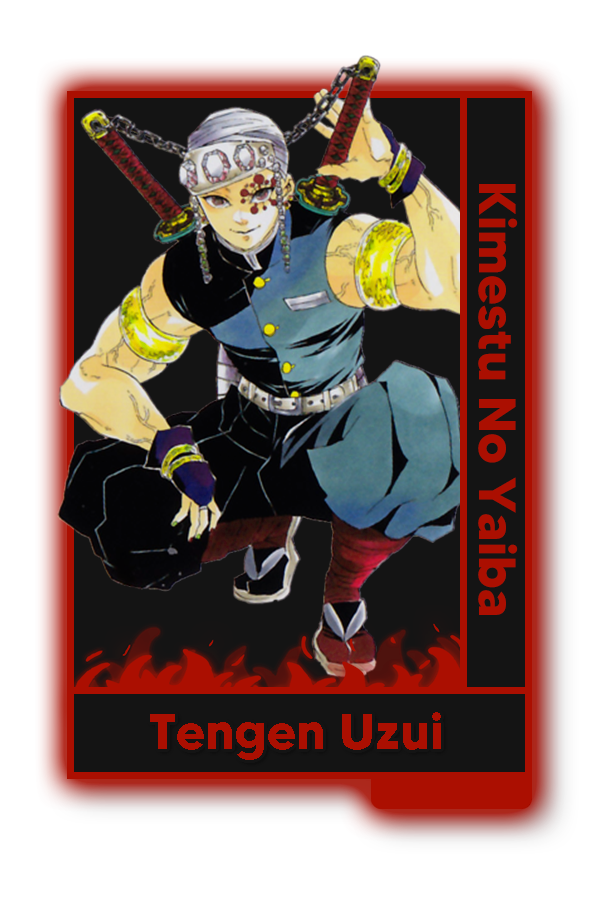
<style>
.page{position:relative;width:600px;height:900px;background:#ffffff}
.page>*{position:absolute;margin:0}
.t1{font:52px "MADETOMMY-Bold";color:#ab0f01}
.t2{font:50.5px "MADETOMMY-Bold";color:#ab0f01}
</style>
<div class="page">
<p class="t1" style="left:478px;top:184px;width:40px;height:431px;rotate:90deg">Kimestu No Yaiba</p>
<p class="t2" style="left:150px;top:712px;width:291px;height:48px">Tengen Uzui</p>
</div>
